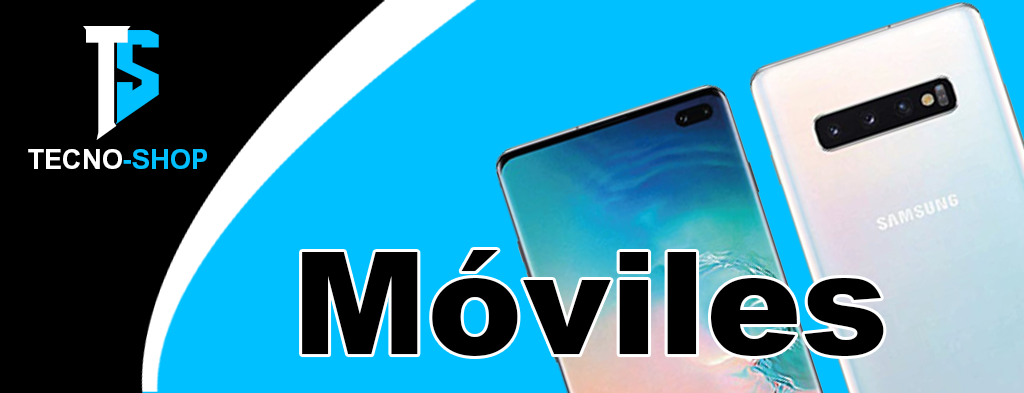
<style>
.page{position:relative;width:1024px;height:393px;background:#00c0ff}
.page>*{position:absolute;margin:0}
.t1{font:140.4px "AmazDooMLeft";color:#ffffff}
.t2{font:120.7px "AmazDooMLeft";color:#00c0ff;scale:1.16 1}
.t3{font:27.2px "Arial-BoldMT";color:#ffffff}
.t4{font:27.2px "Arial-BoldMT";color:#00c0ff}
.t5{font:143.2px "Arial-Black";color:#000000}
</style>
<div class="page">
<p class="t1" style="left:83px;top:26px;width:48px;height:114px">T</p>
<p class="t2" style="left:114px;top:30px;width:45px;height:95px">S</p>
<p class="t3" style="left:28px;top:149px;width:179px;height:20px">TECNO<span class="t4">-SHOP</span></p>
<p class="t5" style="left:302px;top:250px;width:582px;height:106px">Móviles</p>
</div>
